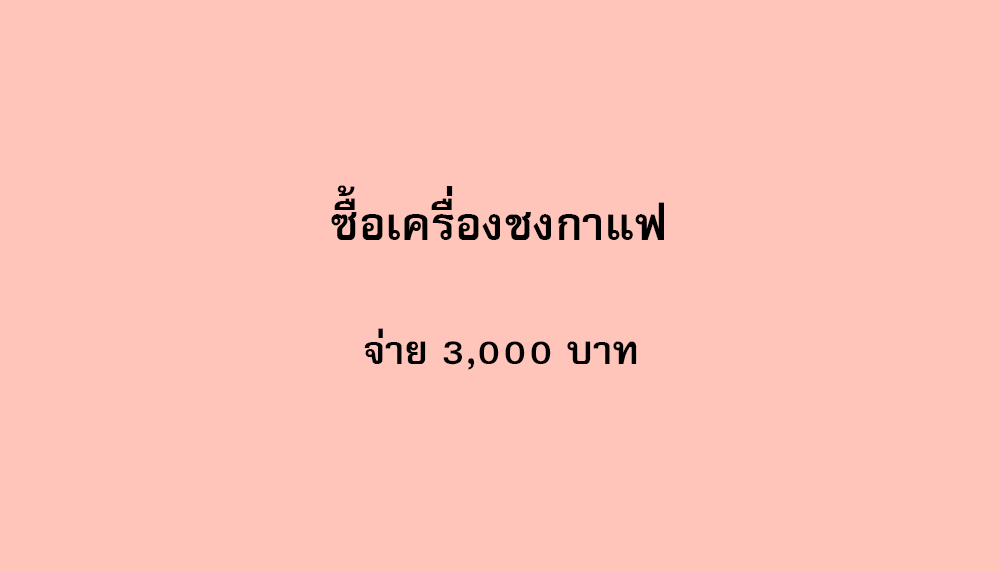
<style>
.page{position:relative;width:1000px;height:572px;background:#ffc4ba}
.page>*{position:absolute;margin:0}
.t1{font:64px "FreesiaUPCBold";color:#000000}
.t2{font:56px "FreesiaUPCBold";color:#000000}
</style>
<div class="page">
<p class="t1" style="left:331px;top:185px;width:333px;height:55px">ซื้อเครื่องชงกาแฟ</p>
<p class="t2" style="left:364px;top:328px;width:273px;height:42px">จ่าย 3,000 บาท</p>
</div>
